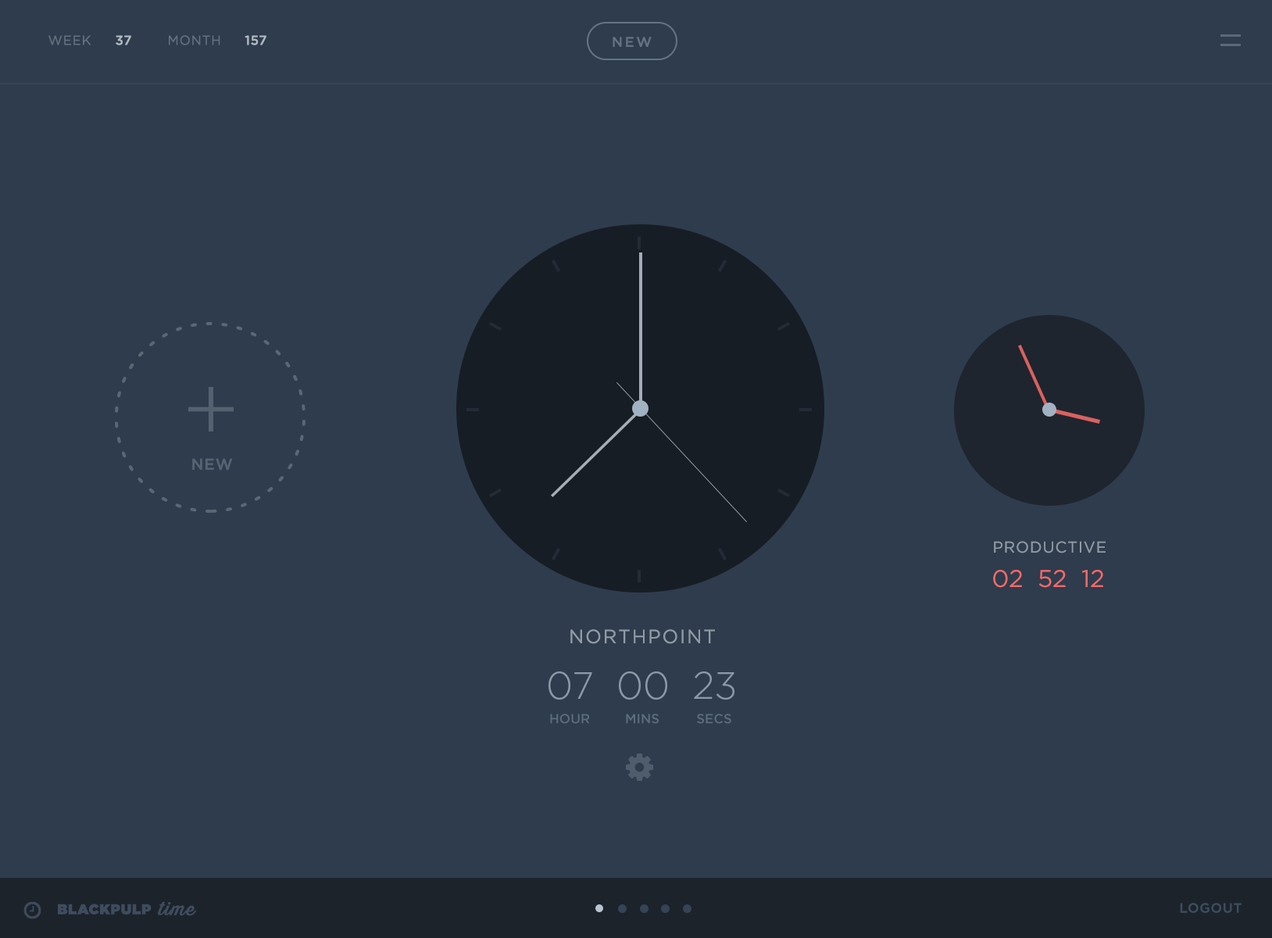
<style>
.page{position:relative;width:1272px;height:938px;background:#2e3c4d}
.page>*{position:absolute;margin:0}
.t1{font:13.1px "GothamHTF-Book";letter-spacing:0.05em;color:#657482}
.t2{font:13.1px "GothamHTF-Medium";letter-spacing:0.05em;color:#b0bac3}
.t3{font:13.9px "GothamHTF-Medium";letter-spacing:0.15em;color:#637382}
.t4{font:15.6px "GothamHTF-Medium";letter-spacing:0.05em;color:#6b7782}
.t5{font:15.6px "GothamHTF-Book";letter-spacing:0.05em;color:#919ba5}
.t6{font:24.2px "GothamHTF-Book";color:#fd6965}
.t7{font:19.1px "GothamHTF-Book";letter-spacing:0.08em;color:#919ba5}
.t8{font:37.5px "GothamHTF-Light";color:#8b9aa8}
.t9{font:13px "GothamHTF-Medium";color:#5d6d7e}
.t10{font:14.1px "GothamHTF-Ultra";letter-spacing:0.05em;color:#3e4c5e}
.t11{font:18px "ThirstyRoughReg";letter-spacing:0.05em;color:#3e4c5e;scale:1.03 1}
.t12{font:13.3px "GothamHTF-Medium";letter-spacing:0.05em;color:#3e4c5e}
</style>
<div class="page">
<p class="t1" style="left:48px;top:35px;width:43px;height:10px;opacity:0.93">WEEK</p>
<p class="t2" style="left:116px;top:35px;width:15px;height:10px">37</p>
<p class="t1" style="left:169px;top:35px;width:51px;height:10px;opacity:0.93">MONTH</p>
<p class="t2" style="left:245px;top:35px;width:21px;height:10px">157</p>
<p class="t3" style="left:613px;top:37px;width:39px;height:10px">NEW</p>
<p class="t4" style="left:192px;top:458px;width:41px;height:12px;opacity:0.62">NEW</p>
<p class="t5" style="left:994px;top:541px;width:111px;height:12px">PRODUCTIVE</p>
<p class="t6" style="left:993px;top:570px;width:110px;height:18px">02  52  12</p>
<p class="t7" style="left:570px;top:629px;width:145px;height:15px">NORTHPOINT</p>
<p class="t8" style="left:548px;top:671px;width:186px;height:28px">07  00  23</p>
<p class="t9" style="left:550px;top:713px;width:40px;height:10px">HOUR</p>
<p class="t9" style="left:626px;top:713px;width:33px;height:10px">MINS</p>
<p class="t9" style="left:697px;top:713px;width:34px;height:10px">SECS</p>
<p class="t10" style="left:58px;top:903px;width:94px;height:11px">BLACKPULP</p>
<p class="t11" style="left:158px;top:901px;width:38px;height:15px;rotate:1deg">time</p>
<p class="t12" style="left:1180px;top:902px;width:61px;height:11px">LOGOUT</p>
</div>
